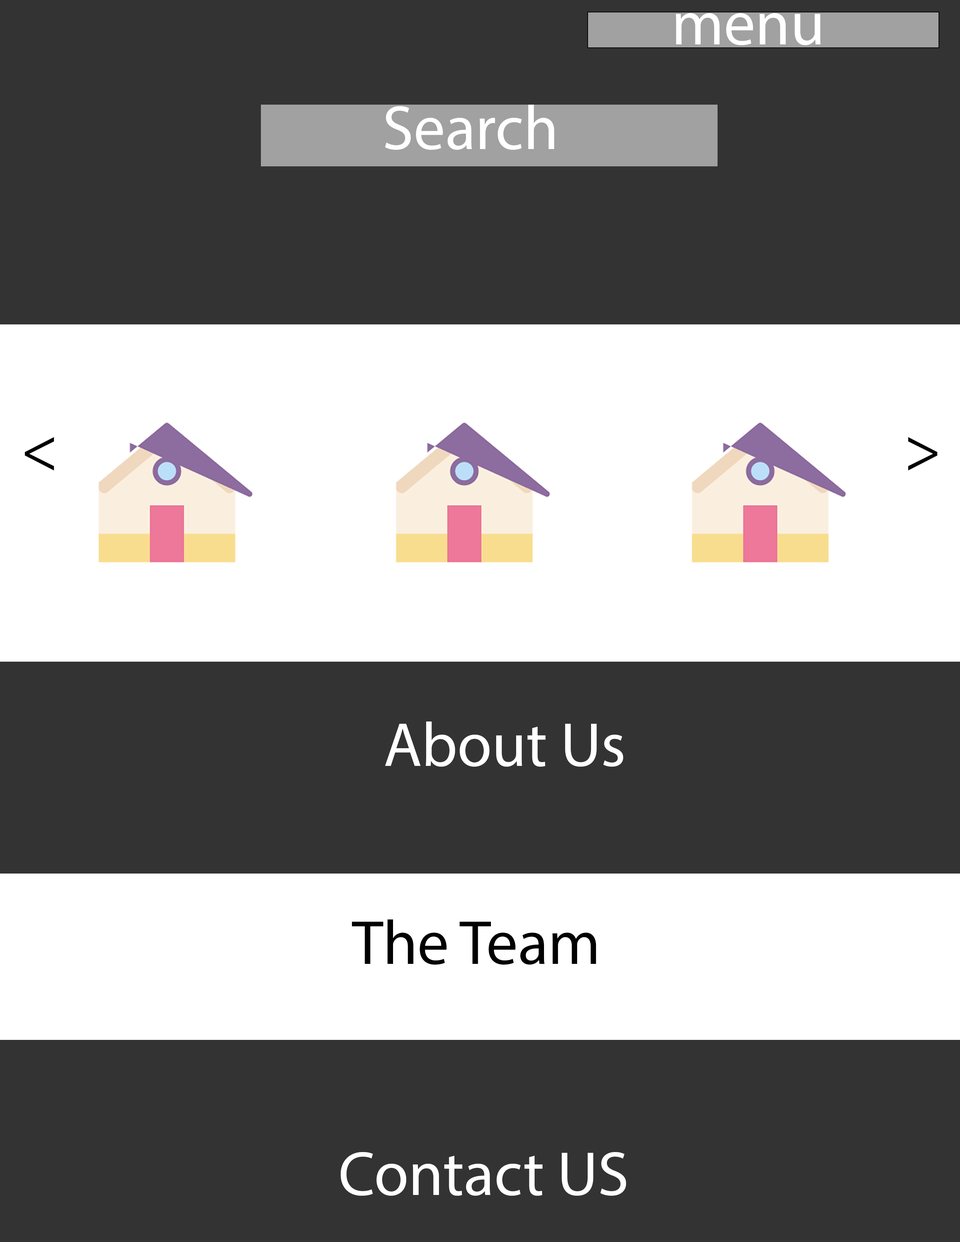
<style>
.page{position:relative;width:960px;height:1242px;background:#333333}
.page>*{position:absolute;margin:0}
.t1{font:62.7px "MyriadPro-Regular";color:#ffffff}
.t2{font:62.7px "MyriadPro-Regular";color:#000000}
.t3{font:62.7px "MyriadPro-Regular";color:#010101}
</style>
<div class="page">
<p class="t1" style="left:676px;top:13px;width:145px;height:33px">menu</p>
<p class="t1" style="left:385px;top:105px;width:169px;height:45px">Search</p>
<p class="t2" style="left:25px;top:437px;width:29px;height:34px">&lt;</p>
<p class="t2" style="left:908px;top:437px;width:29px;height:34px">&gt;</p>
<p class="t1" style="left:385px;top:722px;width:238px;height:45px">About Us</p>
<p class="t3" style="left:352px;top:920px;width:244px;height:45px">The Team</p>
<p class="t1" style="left:341px;top:1152px;width:285px;height:44px">Contact US</p>
</div>
